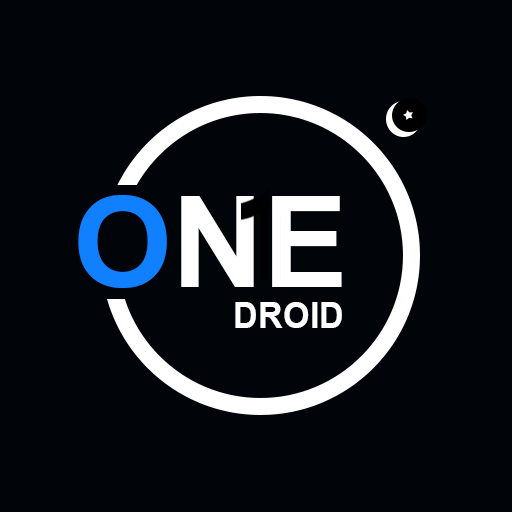
<style>
.page{position:relative;width:512px;height:512px;background:#010409}
.page>*{position:absolute;margin:0}
.t1{font:126.5px "Arial-BoldMT";color:#ffffff}
.t2{font:126.5px "Arial-BoldMT";color:#1180ff}
.t3{font:35.8px "Arial-BoldMT";color:#ffffff;scale:0.96 1}
</style>
<div class="page">
<p class="t1" style="left:78px;top:195px;width:264px;height:93px"><span class="t2">O</span>NE</p>
<p class="t3" style="left:235px;top:302px;width:107px;height:26px">DROID</p>
</div>
